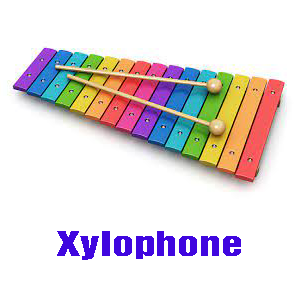
<style>
.page{position:relative;width:300px;height:300px;background:#ffffff}
.page>*{position:absolute;margin:0}
.t1{font:31.3px "UTM-HelvetIns";color:#4006df;scale:1.4 1}
</style>
<div class="page">
<p class="t1" style="left:57px;top:231px;width:184px;height:29px">Xylophone</p>
</div>
